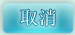
<style>
.page{position:relative;width:75px;height:35px}
.page>*{position:absolute;margin:0}
.t1{font:18px "SimSun";color:#ffffff;scale:1.04 1}
</style>
<div class="page">
<p class="t1" style="left:20px;top:9px;width:36px;height:17px">取消</p>
</div>
